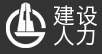
<style>
.page{position:relative;width:102px;height:54px;background:#333333}
.page>*{position:absolute;margin:0}
.t1{font:22px/20.4px "HiraginoSansGB-W3";letter-spacing:0.04em;color:#ffffff}
</style>
<div class="page">
<p class="t1" style="left:53px;top:5px;width:44px;height:41px">建设<br>人力</p>
</div>
